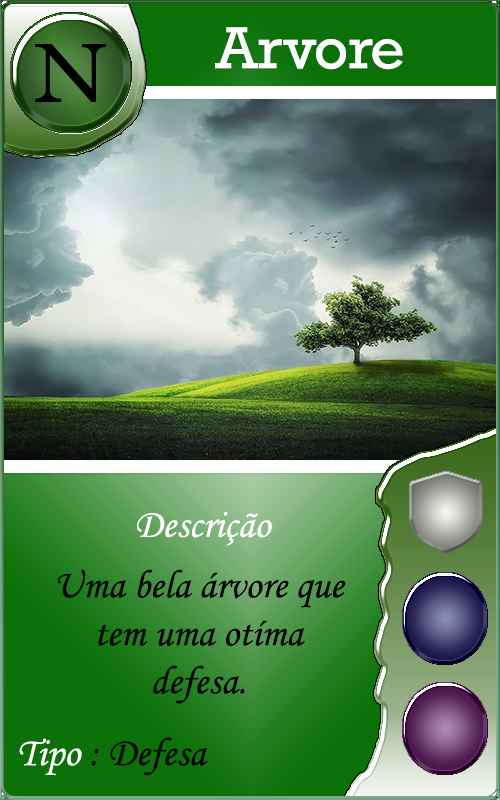
<style>
.page{position:relative;width:500px;height:800px}
.page>*{position:absolute;margin:0}
.t1{font:60px "Rockwell";color:#ffffff}
.t2{font:40px "MonotypeCorsiva";color:#fffefe}
.t3{font:40px "MonotypeCorsiva";color:#000000}
.t4{font:40px "MonotypeCorsiva";color:#fefefe}
</style>
<div class="page">
<p class="t1" style="left:215px;top:27px;width:188px;height:43px">Arvore</p>
<p class="t2" style="left:137px;top:511px;width:135px;height:35px">Descrição</p>
<p class="t3" style="left:57px;top:569px;width:289px;height:135px;text-align:center">Uma bela árvore que<br>tem uma otíma<br>defesa.</p>
<p class="t3" style="left:19px;top:737px;width:189px;height:39px"><span class="t4">Tipo </span>: Defesa</p>
</div>
